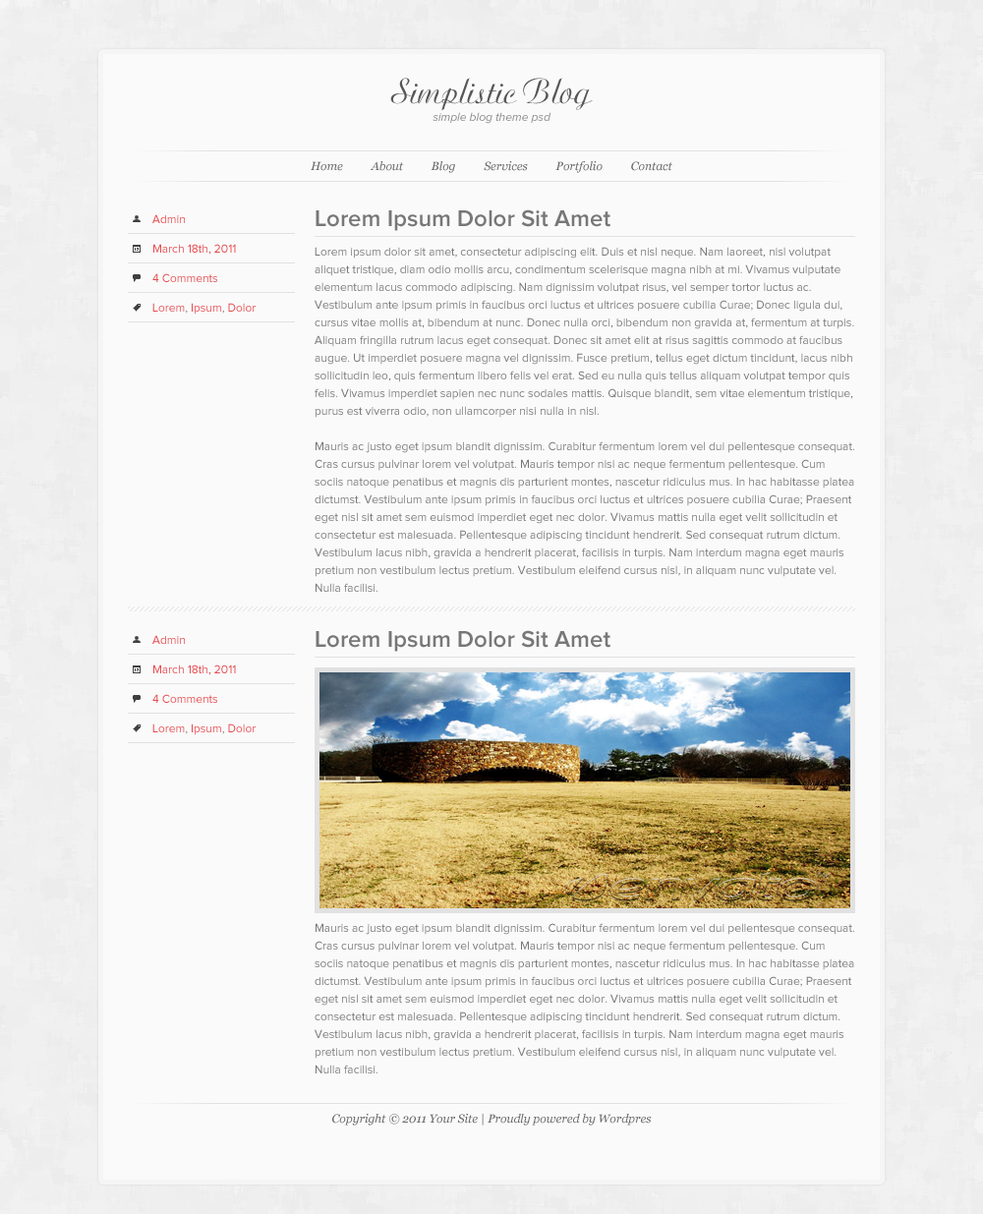
<style>
.page{position:relative;width:983px;height:1214px;background:#fafafa}
.page>*{position:absolute;margin:0}
.t1{font:11.8px/17.7px "ProximaNova-RegularIt";color:#888888}
.t2{font:35.4px/17.7px "Ariston-Normal";color:#555555}
.t3{font:11.8px "Georgia-Italic";color:#666666}
.t4{font:23.6px "ProximaNova-Semibold";color:#777777}
.t5{font:11.8px "ProximaNova-Regular";color:#e64b4f}
.t6{font:11.8px/17.7px "ProximaNova-Regular";color:#777777}
.t7{font:11.8px "ProximaNova-Regular";color:#888888}
</style>
<div class="page">
<p class="t1" style="left:390px;top:78px;width:203px;height:46px;text-align:center"><span class="t2">Simplistic Blog<br></span>simple blog theme psd</p>
<p class="t3" style="left:311px;top:161px;width:361px;height:12px">Home          About          Blog          Services          Portfolio          Contact</p>
<p class="t4" style="left:315px;top:209px;width:295px;height:22px">Lorem Ipsum Dolor Sit Amet</p>
<p class="t5" style="left:152px;top:214px;width:33px;height:9px">Admin</p>
<p class="t5" style="left:153px;top:244px;width:83px;height:10px">March 18th, 2011</p>
<p class="t6" style="left:314px;top:247px;width:540px;height:345px">Lorem ipsum dolor sit amet, consectetur adipiscing elit. Duis et nisl neque. Nam laoreet, nisl volutpat aliquet tristique, diam odio mollis arcu, condimentum scelerisque magna nibh at mi. Vivamus vulputate elementum lacus commodo adipiscing. Nam dignissim volutpat risus, vel semper tortor luctus ac. Vestibulum ante ipsum primis in faucibus orci luctus et ultrices posuere cubilia Curae; Donec ligula dui, cursus vitae mollis at, bibendum at nunc. Donec nulla orci, bibendum non gravida at, fermentum at turpis. Aliquam fringilla rutrum lacus eget consequat. Donec sit amet elit at risus sagittis commodo at faucibus augue. Ut imperdiet posuere magna vel dignissim. Fusce pretium, tellus eget dictum tincidunt, lacus nibh sollicitudin leo, quis fermentum libero felis vel erat. Sed eu nulla quis tellus aliquam volutpat tempor quis felis. Vivamus imperdiet sapien nec nunc sodales mattis. Quisque blandit, sem vitae elementum tristique, purus est viverra odio, non ullamcorper nisi nulla in nisl.<br><br>Mauris ac justo eget ipsum blandit dignissim. Curabitur fermentum lorem vel dui pellentesque consequat. Cras cursus pulvinar lorem vel volutpat. Mauris tempor nisi ac neque fermentum pellentesque. Cum sociis natoque penatibus et magnis dis parturient montes, nascetur ridiculus mus. In hac habitasse platea dictumst. Vestibulum ante ipsum primis in faucibus orci luctus et ultrices posuere cubilia Curae; Praesent eget nisl sit amet sem euismod imperdiet eget nec dolor. Vivamus mattis nulla eget velit sollicitudin et consectetur est malesuada. Pellentesque adipiscing tincidunt hendrerit. Sed consequat rutrum dictum. Vestibulum lacus nibh, gravida a hendrerit placerat, facilisis in turpis. Nam interdum magna eget mauris pretium non vestibulum lectus pretium. Vestibulum eleifend cursus nisl, in aliquam nunc vulputate vel. Nulla facilisi.</p>
<p class="t5" style="left:152px;top:273px;width:65px;height:9px">4 Comments</p>
<p class="t5" style="left:152px;top:303px;width:103px;height:11px">Lorem<span class="t7">, </span>Ipsum<span class="t7">, </span>Dolor</p>
<p class="t4" style="left:315px;top:630px;width:295px;height:21px">Lorem Ipsum Dolor Sit Amet</p>
<p class="t5" style="left:152px;top:635px;width:33px;height:9px">Admin</p>
<p class="t5" style="left:153px;top:664px;width:83px;height:11px">March 18th, 2011</p>
<p class="t5" style="left:152px;top:694px;width:65px;height:9px">4 Comments</p>
<p class="t5" style="left:152px;top:723px;width:103px;height:12px">Lorem<span class="t7">, </span>Ipsum<span class="t7">, </span>Dolor</p>
<p class="t6" style="left:314px;top:923px;width:540px;height:150px">Mauris ac justo eget ipsum blandit dignissim. Curabitur fermentum lorem vel dui pellentesque consequat. Cras cursus pulvinar lorem vel volutpat. Mauris tempor nisi ac neque fermentum pellentesque. Cum sociis natoque penatibus et magnis dis parturient montes, nascetur ridiculus mus. In hac habitasse platea dictumst. Vestibulum ante ipsum primis in faucibus orci luctus et ultrices posuere cubilia Curae; Praesent eget nisl sit amet sem euismod imperdiet eget nec dolor. Vivamus mattis nulla eget velit sollicitudin et consectetur est malesuada. Pellentesque adipiscing tincidunt hendrerit. Sed consequat rutrum dictum. Vestibulum lacus nibh, gravida a hendrerit placerat, facilisis in turpis. Nam interdum magna eget mauris pretium non vestibulum lectus pretium. Vestibulum eleifend cursus nisl, in aliquam nunc vulputate vel. Nulla facilisi.</p>
<p class="t3" style="left:332px;top:1113px;width:319px;height:12px">Copyright © 2011 Your Site | Proudly powered by Wordpres</p>
</div>
